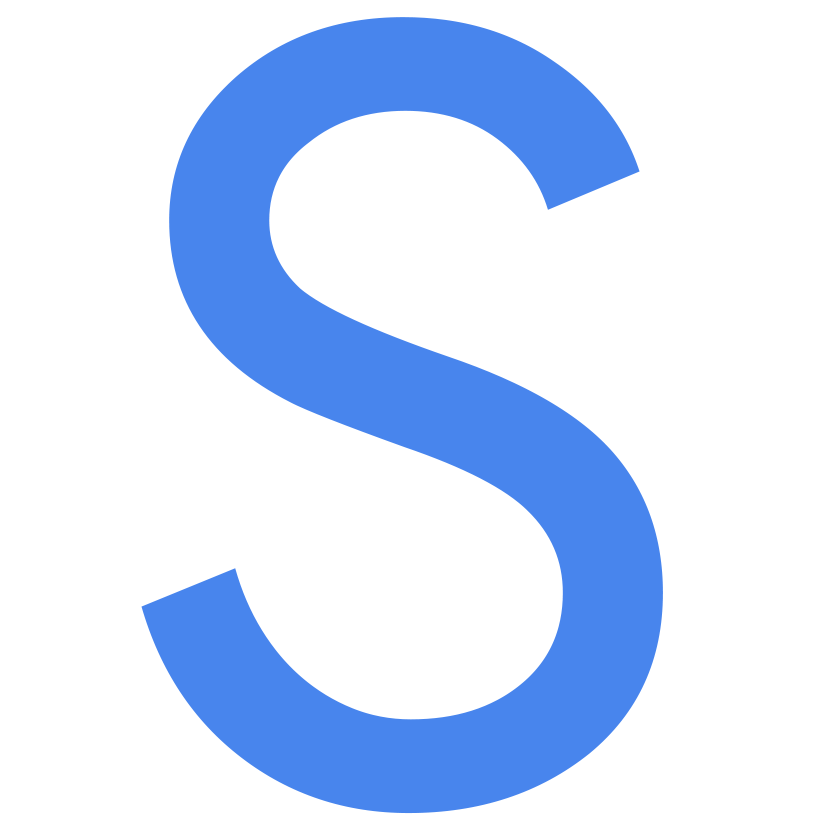
<style>
.page{position:relative;width:833px;height:833px;background:#ffffff}
.page>*{position:absolute;margin:0}
.t1{font:1064px "ProductSans-Regular";color:#4885ed}
</style>
<div class="page">
<p class="t1" style="left:141px;top:17px;width:522px;height:797px">S</p>
</div>
